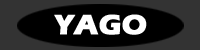
<style>
.page{position:relative;width:200px;height:50px;background:#333333}
.page>*{position:absolute;margin:0}
.t1{font:28.8px "ErasITC-Bold";color:#ffffff;font-weight:bold}
</style>
<div class="page">
<p class="t1" style="left:54px;top:14px;width:93px;height:21px">YAGO</p>
</div>
